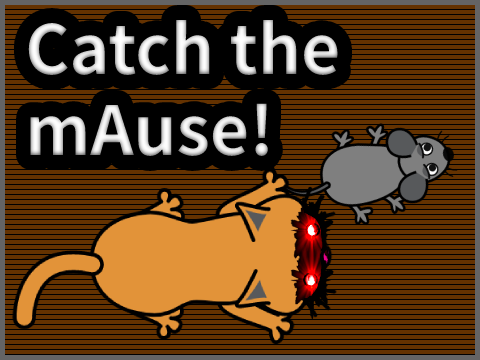
<style>
.page{position:relative;width:480px;height:360px;background:#643200}
.page>*{position:absolute;margin:0}
.t1{font:67.6px "NotoSansTC-Bold"}
</style>
<div class="page">
<p class="t1" style="left:28px;top:20px;width:310px;height:136px">Catch the<br>mAuse!</p>
</div>
